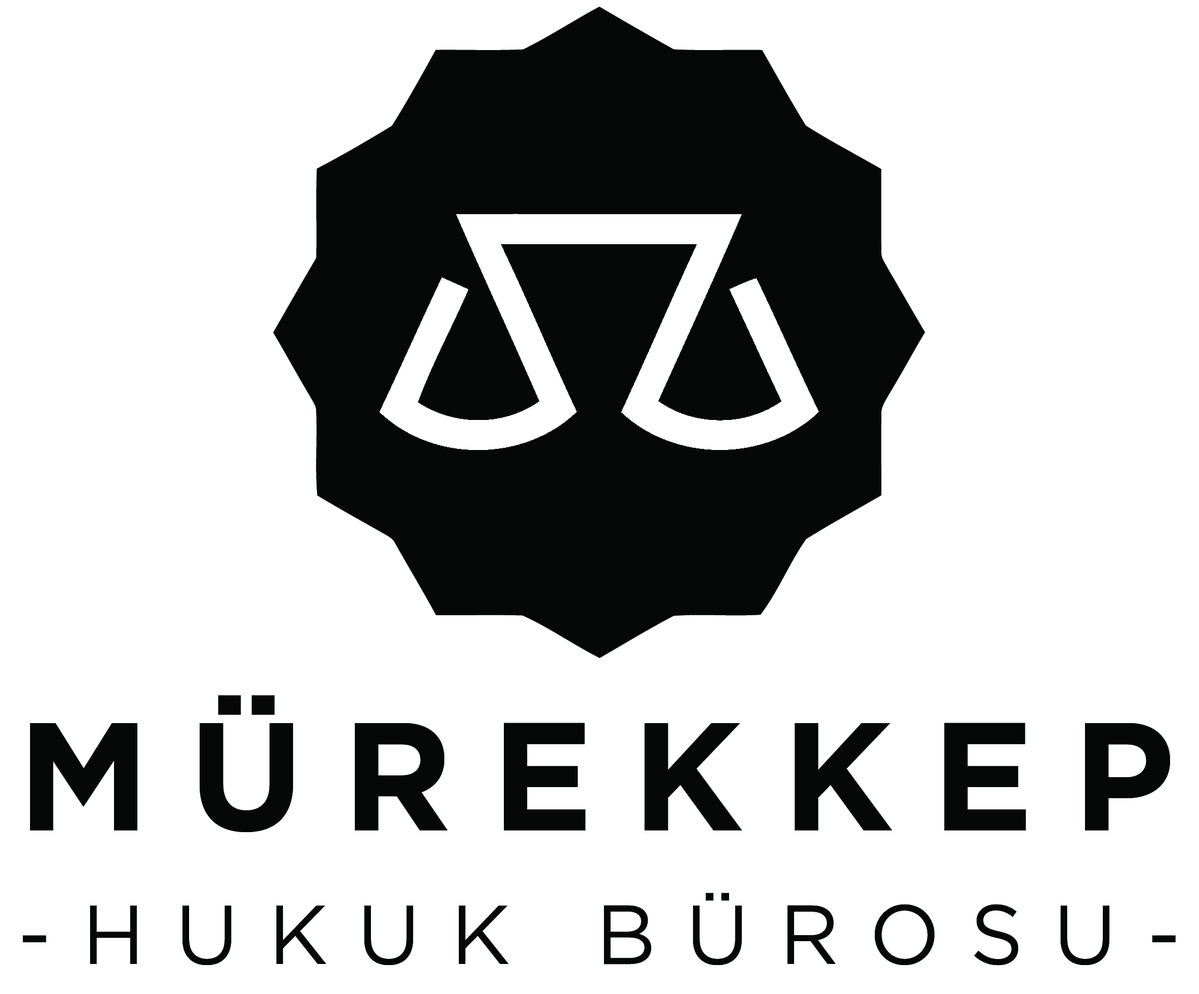
<style>
.page{position:relative;width:1199px;height:994px;background:#ffffff}
.page>*{position:absolute;margin:0}
.t1{font:83.4px/13.4px "Gotham-Book";letter-spacing:0.36em;color:#060808}
.t2{font:153px/13.4px "Gotham-Bold";letter-spacing:0.25em;color:#060808;text-transform:uppercase}
</style>
<div class="page">
<p class="t1" style="left:23px;top:695px;width:1153px;height:271px"><span class="t2">mÜREKKEP <br><br><br><br><br><br><br><br><br><br></span>-HUKUK BÜROSU-</p>
</div>
